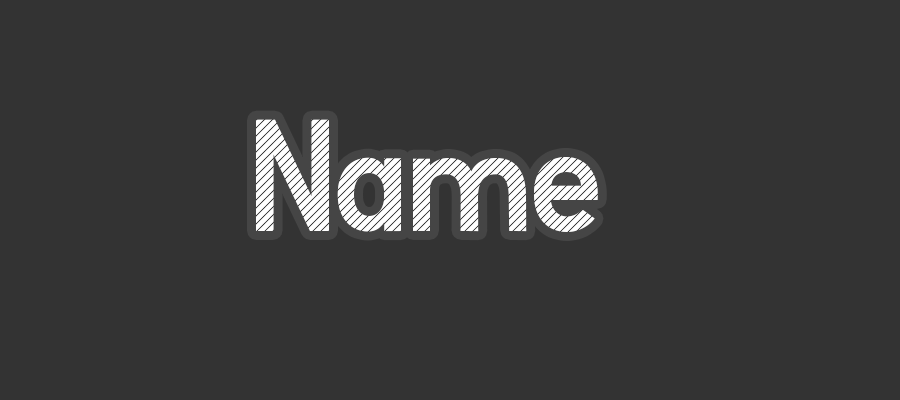
<style>
.page{position:relative;width:900px;height:400px;background:#333333}
.page>*{position:absolute;margin:0}
.t1{font:150px "PlutoniumSans-Regular";color:#ffffff}
</style>
<div class="page">
<p class="t1" style="left:256px;top:119px;width:342px;height:113px">Name</p>
</div>
